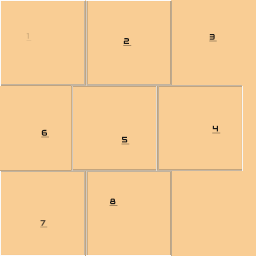
<style>
.page{position:relative;width:256px;height:256px;background:#f9cd94}
.page>*{position:absolute;margin:0}
.t1{font:8px "Audiowide-Regular";letter-spacing:0.205em;color:#d9b381;text-decoration:underline}
.t2{font:8px "Audiowide-Regular";letter-spacing:0.205em;color:#181716;text-decoration:underline}
.t3{font:8px "Audiowide-Regular";letter-spacing:0.205em;color:#5f4f3b;text-decoration:underline}
</style>
<div class="page">
<p class="t1" style="left:26px;top:33px;width:6px;height:8px">1</p>
<p class="t2" style="left:123px;top:38px;width:9px;height:8px">2</p>
<p class="t2" style="left:209px;top:34px;width:8px;height:8px">3</p>
<p class="t2" style="left:212px;top:125px;width:9px;height:9px">4</p>
<p class="t2" style="left:41px;top:129px;width:8px;height:9px">6</p>
<p class="t2" style="left:121px;top:136px;width:9px;height:9px">5</p>
<p class="t2" style="left:109px;top:198px;width:9px;height:8px">8</p>
<p class="t3" style="left:40px;top:220px;width:8px;height:8px">7</p>
</div>
